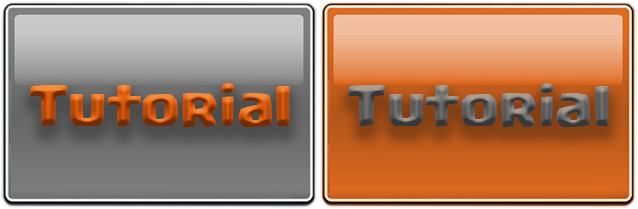
<style>
.page{position:relative;width:638px;height:209px}
.page>*{position:absolute;margin:0}
.t1{font:44.2px "Supercell-Magic"}
</style>
<div class="page">
<p class="t1" style="left:30px;top:83px;width:260px;height:44px">Tutorial</p>
<p class="t1" style="left:348px;top:83px;width:261px;height:44px">Tutorial</p>
</div>
